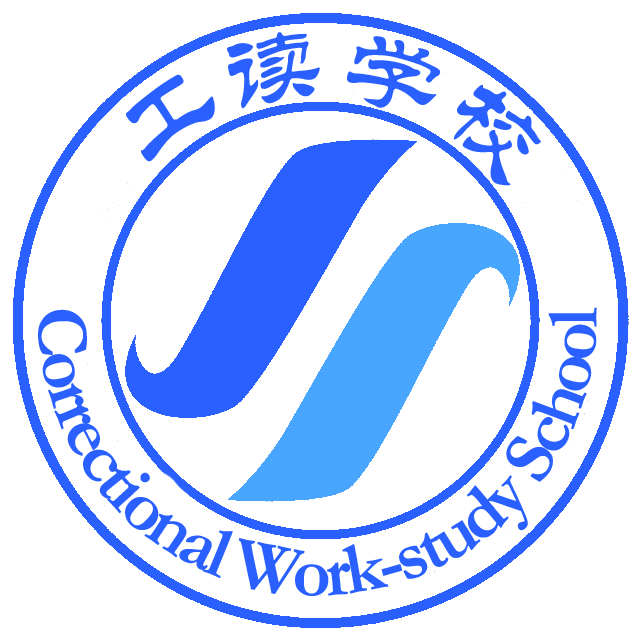
<style>
.page{position:relative;width:640px;height:640px;background:#ffffff}
.page>*{position:absolute;margin:0}
.t1{font:103.2px "STLiti";letter-spacing:0.01em;color:#2960ff}
.t2{font:74.3px "Garamond-Bold";letter-spacing:-0.05em;color:#2960ff}
</style>
<div class="page">
<p class="t1" style="left:126px;top:32px;width:415px;height:154px">工读学校</p>
<p class="t2" style="left:38px;top:307px;width:559px;height:289px;rotate:-22deg">Correctional Work-study School</p>
</div>
